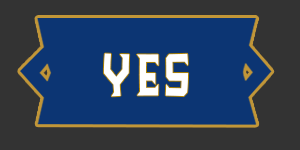
<style>
.page{position:relative;width:300px;height:150px;background:#0c3573}
.page>*{position:absolute;margin:0}
.t1{font:62.5px "Lorde-Havana";letter-spacing:0.1em;color:#ffffff;scale:0.75 1}
</style>
<div class="page">
<p class="t1" style="left:103px;top:53px;width:86px;height:44px">YES</p>
</div>
